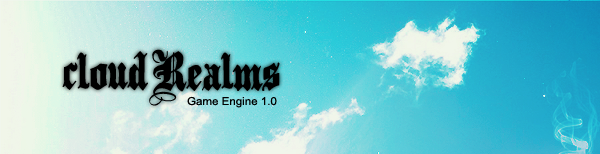
<style>
.page{position:relative;width:600px;height:154px}
.page>*{position:absolute;margin:0}
.t1{font:45px "PlainBlack-Normal";color:#000000;scale:1.05 1}
.t2{font:11px "ArialMT";color:#000000;scale:1.05 1}
</style>
<div class="page">
<p class="t1" style="left:62px;top:49px;width:218px;height:57px">cloudRealms</p>
<p class="t2" style="left:187px;top:96px;width:90px;height:12px">Game Engine 1.0</p>
</div>
